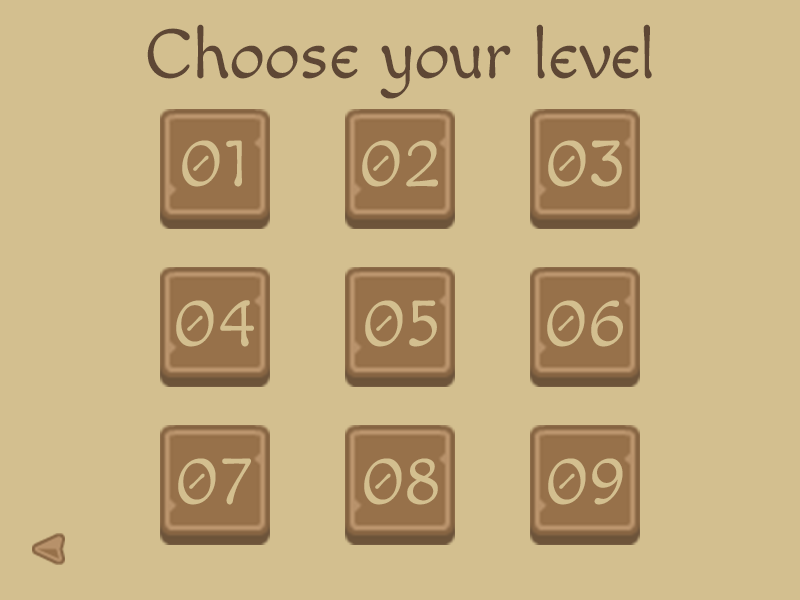
<style>
.page{position:relative;width:800px;height:600px;background:#d3bf8f}
.page>*{position:absolute;margin:0}
.t1{font:71.1px "Macondo-Regular";color:#5e4735}
.t2{font:71.1px "Macondo-Regular";color:#d3bf8f}
</style>
<div class="page">
<p class="t1" style="left:147px;top:24px;width:505px;height:75px">Choose your level</p>
<p class="t2" style="left:182px;top:140px;width:60px;height:47px">01</p>
<p class="t2" style="left:362px;top:140px;width:76px;height:47px">02</p>
<p class="t2" style="left:548px;top:140px;width:74px;height:47px">03</p>
<p class="t2" style="left:176px;top:300px;width:78px;height:47px">04</p>
<p class="t2" style="left:365px;top:300px;width:72px;height:47px">05</p>
<p class="t2" style="left:547px;top:300px;width:76px;height:47px">06</p>
<p class="t2" style="left:178px;top:458px;width:73px;height:47px">07</p>
<p class="t2" style="left:364px;top:458px;width:74px;height:47px">08</p>
<p class="t2" style="left:548px;top:458px;width:75px;height:47px">09</p>
</div>
